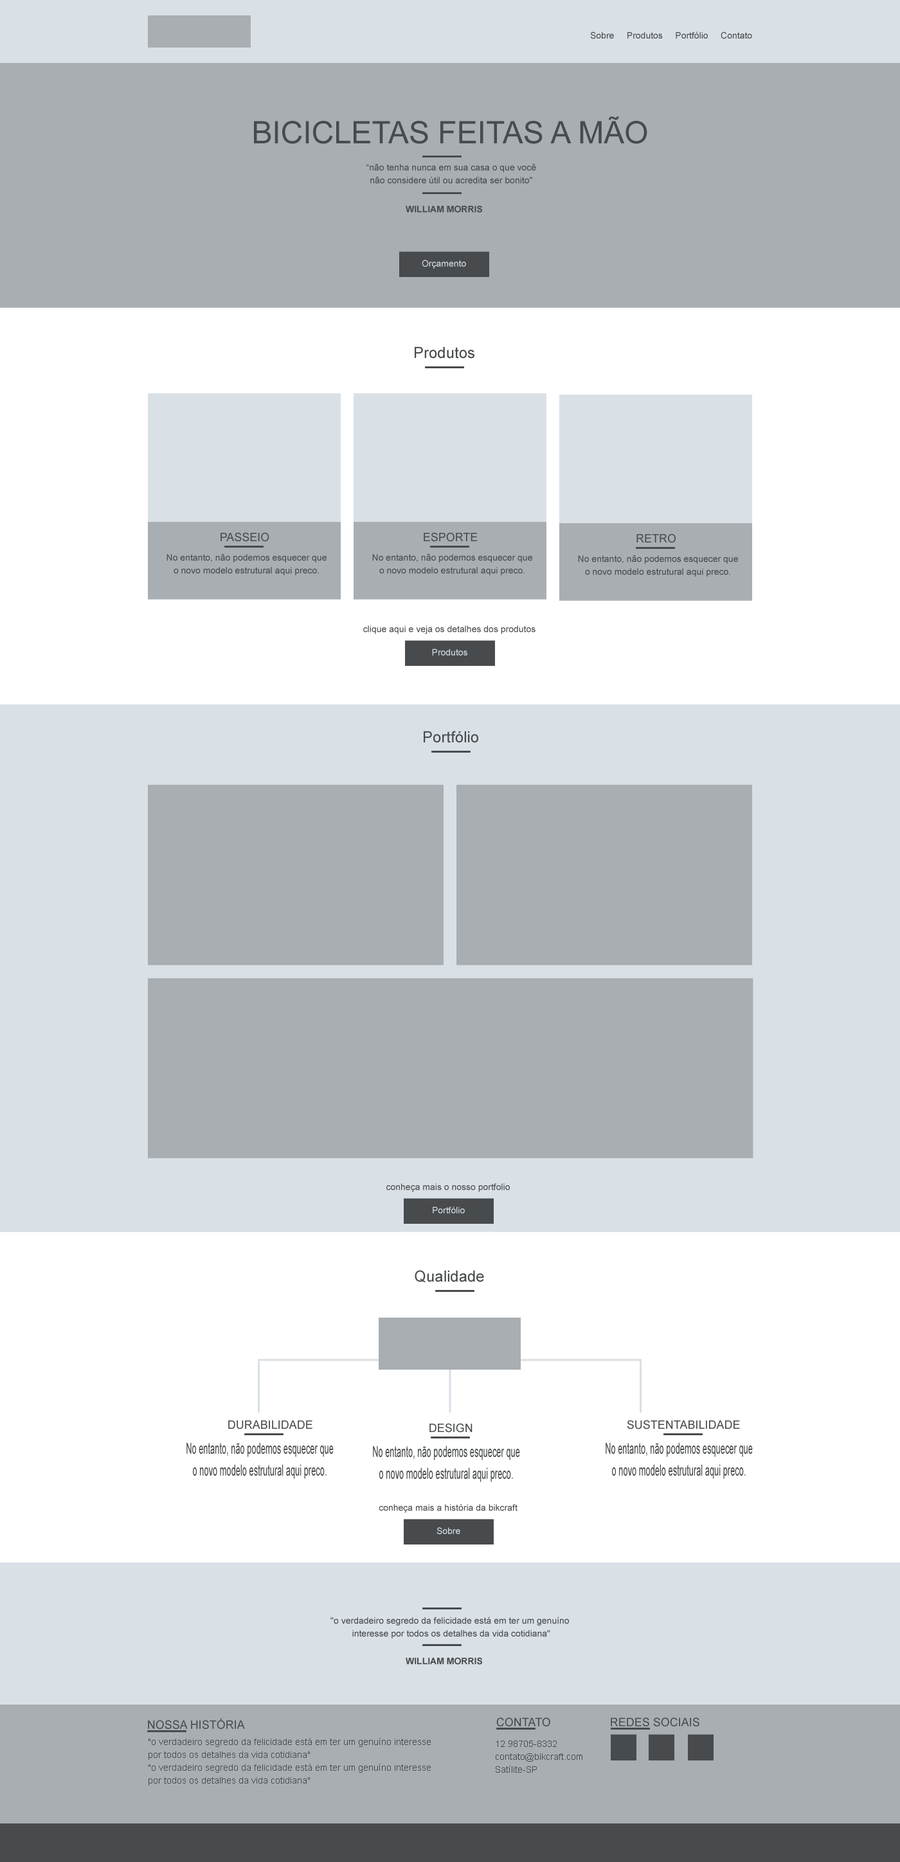
<style>
.page{position:relative;width:900px;height:1862px;background:#a9aeb3}
.page>*{position:absolute;margin:0}
.t1{font:9px "ArialMT";color:#484b4d}
.t2{font:30.9px "ArialMT";color:#484b4d;text-transform:uppercase}
.t3{font:9px/12.9px "ArialMT";color:#484b4d}
.t4{font:9px "Arial-BoldMT";color:#484b4d;text-transform:uppercase}
.t5{font:9px "ArialMT";color:#d9e0e6}
.t6{font:15.4px "ArialMT";color:#484b4d}
.t7{font:11.6px "ArialMT";color:#484b4d}
.t8{font:11.6px "ArialMT";color:#484b4d;text-transform:uppercase}
.t9{font:15.3px/21.9px "ArialMT";color:#484b4d;scale:0.54 1}
</style>
<div class="page">
<p class="t1" style="left:590px;top:32px;width:162px;height:7px">Sobre     Produtos     Portfólio     Contato</p>
<p class="t2" style="left:254px;top:116px;width:393px;height:28px">Bicicletas Feitas a Mão</p>
<p class="t3" style="left:366px;top:163px;width:170px;height:21px;text-align:center">“não tenha nunca em sua casa o que você<br>não considere útil ou acredita ser bonito"</p>
<p class="t4" style="left:406px;top:206px;width:76px;height:7px">William morris</p>
<p class="t5" style="left:422px;top:260px;width:44px;height:9px">Orçamento</p>
<p class="t6" style="left:415px;top:346px;width:59px;height:13px">Produtos</p>
<p class="t7" style="left:221px;top:532px;width:48px;height:10px">PASSEIO</p>
<p class="t7" style="left:424px;top:532px;width:54px;height:10px">ESPORTE</p>
<p class="t7" style="left:636px;top:534px;width:40px;height:9px">RETRO</p>
<p class="t3" style="left:166px;top:554px;width:161px;height:21px;text-align:center">No entanto, não podemos esquecer que o novo modelo estrutural aqui preco.</p>
<p class="t3" style="left:372px;top:554px;width:160px;height:21px;text-align:center">No entanto, não podemos esquecer que o novo modelo estrutural aqui preco.</p>
<p class="t3" style="left:578px;top:555px;width:160px;height:22px;text-align:center">No entanto, não podemos esquecer que o novo modelo estrutural aqui preco.</p>
<p class="t1" style="left:363px;top:626px;width:173px;height:8px">clique aqui e veja os detalhes dos produtos</p>
<p class="t5" style="left:432px;top:649px;width:35px;height:7px">Produtos</p>
<p class="t6" style="left:424px;top:731px;width:54px;height:12px">Portfólio</p>
<p class="t1" style="left:386px;top:1184px;width:124px;height:8px">conheça mais o nosso portfolio</p>
<p class="t5" style="left:433px;top:1207px;width:32px;height:7px">Portfólio</p>
<p class="t6" style="left:415px;top:1270px;width:69px;height:13px">Qualidade</p>
<p class="t8" style="left:228px;top:1421px;width:84px;height:9px">Durabilidade</p>
<p class="t7" style="left:627px;top:1420px;width:113px;height:10px">SUSTENTABILIDADE</p>
<p class="t7" style="left:429px;top:1423px;width:44px;height:10px">DESIGN</p>
<p class="t9" style="left:186px;top:1443px;width:148px;height:36px;text-align:center">No entanto, não podemos esquecer que o novo modelo estrutural aqui preco.<br><br>aqui precoaqui precoaqui preco</p>
<p class="t9" style="left:373px;top:1446px;width:147px;height:36px;text-align:center">No entanto, não podemos esquecer que o novo modelo estrutural aqui preco.<br><br>aqui precoaqui precoaqui preco</p>
<p class="t9" style="left:606px;top:1443px;width:147px;height:36px;text-align:center">No entanto, não podemos esquecer que o novo modelo estrutural aqui preco.<br><br>aqui precoaqui precoaqui preco</p>
<p class="t1" style="left:379px;top:1504px;width:139px;height:9px">conheça mais a história da bikcraft</p>
<p class="t5" style="left:437px;top:1527px;width:23px;height:7px">Sobre</p>
<p class="t3" style="left:330px;top:1617px;width:239px;height:22px;text-align:center">"o verdadeiro segredo da felicidade está em ter um genuíno <br>interesse por todos os detalhes da vida cotidiana"</p>
<p class="t4" style="left:406px;top:1658px;width:76px;height:7px">William morris</p>
<p class="t8" style="left:148px;top:1718px;width:97px;height:11px">Nossa História</p>
<p class="t8" style="left:496px;top:1718px;width:54px;height:9px">contato</p>
<p class="t8" style="left:611px;top:1718px;width:88px;height:9px">REDES SOCIAIS</p>
<p class="t3" style="left:148px;top:1738px;width:283px;height:48px;text-align:center">"o verdadeiro segredo da felicidade está em ter um genuíno interesse por todos os detalhes da vida cotidiana"<br>"o verdadeiro segredo da felicidade está em ter um genuíno interesse por todos os detalhes da vida cotidiana"</p>
<p class="t3" style="left:496px;top:1741px;width:86px;height:32px">12 98705-8332<br>contato@bikcraft.com<br>Satílite-SP</p>
</div>
